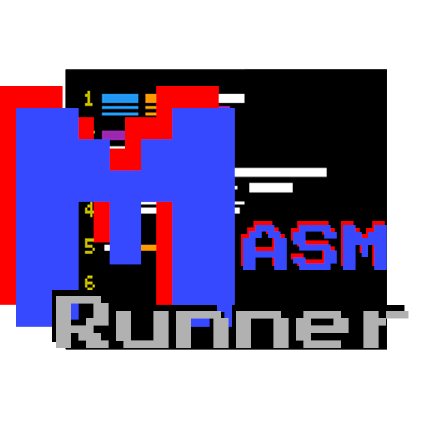
<style>
.page{position:relative;width:422px;height:422px;background:#ffffff}
.page>*{position:absolute;margin:0}
.t1{font:250px "PressStart2P-Regular"}
.t2{font:250px "PressStart2P-Regular";color:#3749ff}
.t3{font:50px "PressStart2P-Regular"}
.t4{font:50px "PressStart2P-Regular";color:#3749ff}
.t5{font:60px "PressStart2P-Regular";color:#b1b1b1}
</style>
<div class="page">
<p class="t1" style="left:0px;top:86px;width:219px;height:219px">M</p>
<p class="t2" style="left:16px;top:108px;width:219px;height:219px">M</p>
<p class="t3" style="left:241px;top:221px;width:144px;height:45px">ASM</p>
<p class="t4" style="left:243px;top:225px;width:144px;height:45px">ASM</p>
<p class="t5" style="left:56px;top:296px;width:353px;height:52px">Runner</p>
</div>
